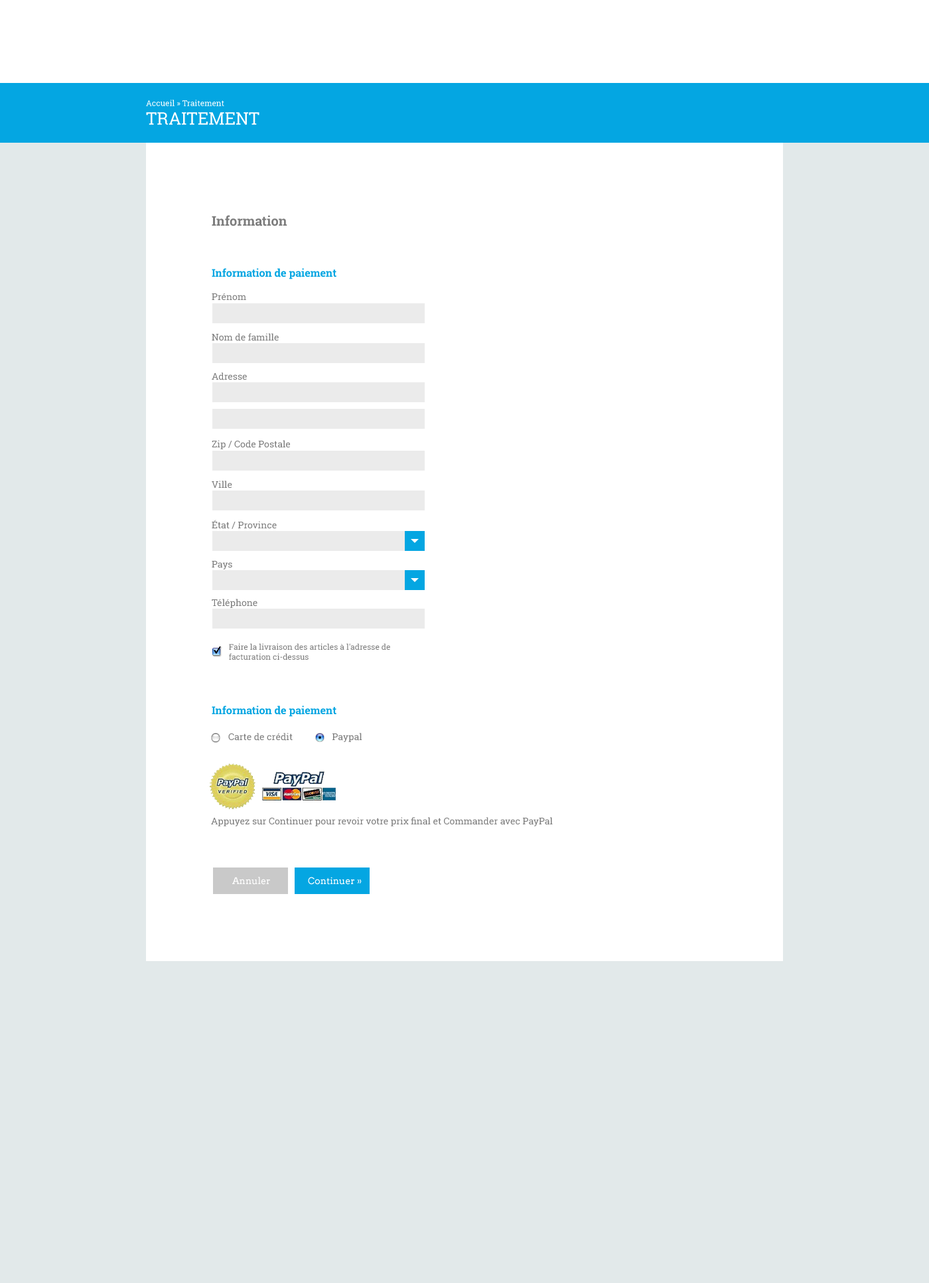
<style>
.page{position:relative;width:929px;height:1283px;background:#ffffff}
.page>*{position:absolute;margin:0}
.t1{font:8px/9.3px "RobotoSlab-Regular";color:#ffffff}
.t2{font:17.3px/18.6px "RobotoSlab-Regular";color:#ffffff;text-transform:uppercase}
.t3{font:13.3px "RobotoSlab-Bold";color:#7d7d7d}
.t4{font:10.6px "RobotoSlab-Bold";color:#04a6e2}
.t5{font:9.3px "RobotoSlab-Regular";color:#7d7d7d}
.t6{font:8px "RobotoSlab-Regular";color:#7d7d7d}
.t7{font:9.3px "Arvo";color:#ffffff}
</style>
<div class="page">
<p class="t1" style="left:146px;top:100px;width:114px;height:25px">Accueil » Traitement<br><span class="t2">Traitement</span></p>
<p class="t3" style="left:212px;top:215px;width:75px;height:11px">Information</p>
<p class="t4" style="left:212px;top:268px;width:125px;height:11px">Information de paiement</p>
<p class="t5" style="left:212px;top:293px;width:34px;height:8px">Prénom</p>
<p class="t5" style="left:212px;top:333px;width:67px;height:8px">Nom de famille</p>
<p class="t5" style="left:212px;top:372px;width:35px;height:8px">Adresse</p>
<p class="t5" style="left:212px;top:440px;width:78px;height:9px">Zip / Code Postale</p>
<p class="t5" style="left:212px;top:481px;width:20px;height:8px">Ville</p>
<p class="t5" style="left:212px;top:520px;width:65px;height:9px">État / Province</p>
<p class="t5" style="left:212px;top:561px;width:20px;height:9px">Pays</p>
<p class="t5" style="left:212px;top:599px;width:46px;height:9px">Téléphone</p>
<p class="t6" style="left:229px;top:643px;width:161px;height:17px">Faire la livraison des articles à l'adresse de<br>facturation ci-dessus</p>
<p class="t4" style="left:212px;top:706px;width:125px;height:11px">Information de paiement</p>
<p class="t5" style="left:228px;top:733px;width:65px;height:8px">Carte de crédit</p>
<p class="t5" style="left:333px;top:733px;width:29px;height:9px">Paypal</p>
<p class="t5" style="left:211px;top:817px;width:342px;height:9px">Appuyez sur Continuer pour revoir votre prix final et Commander avec PayPal</p>
<p class="t7" style="left:232px;top:877px;width:38px;height:8px">Annuler</p>
<p class="t7" style="left:308px;top:877px;width:54px;height:8px">Continuer »</p>
</div>
